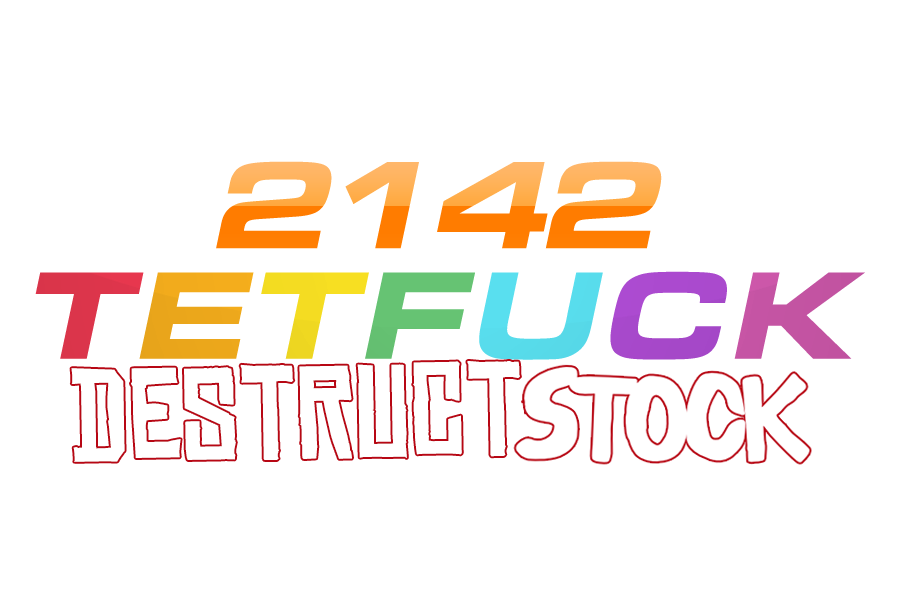
<style>
.page{position:relative;width:900px;height:600px;background:#ffffff}
.page>*{position:absolute;margin:0}
.t1{font:129.2px "EurostileExt-BlaIta";letter-spacing:-0.1em}
.t2{font:129.2px "EurostileExt-BlaIta";color:#f13a52}
.t3{font:129.2px "EurostileExt-BlaIta";color:#fab11d}
.t4{font:129.2px "EurostileExt-BlaIta";color:#f7df22}
.t5{font:129.2px "EurostileExt-BlaIta";color:#66c373}
.t6{font:129.2px "EurostileExt-BlaIta";color:#59dfef}
.t7{font:129.2px "EurostileExt-BlaIta";color:#af4cd4}
.t8{font:129.2px "EurostileExt-BlaIta";color:#d55bb1}
.t9{font:125.2px "ChineseRocksRg-Regular";color:#ffffff}
</style>
<div class="page">
<p class="t1" style="left:216px;top:161px;width:446px;height:88px">2142</p>
<p class="t2" style="left:35px;top:271px;width:830px;height:89px">T<span class="t3">E</span><span class="t4">T</span><span class="t5">F</span><span class="t6">U</span><span class="t7">C</span><span class="t8">K</span></p>
<p class="t9" style="left:71px;top:361px;width:449px;height:101px;rotate:-1deg">DESTRUCT</p>
</div>
